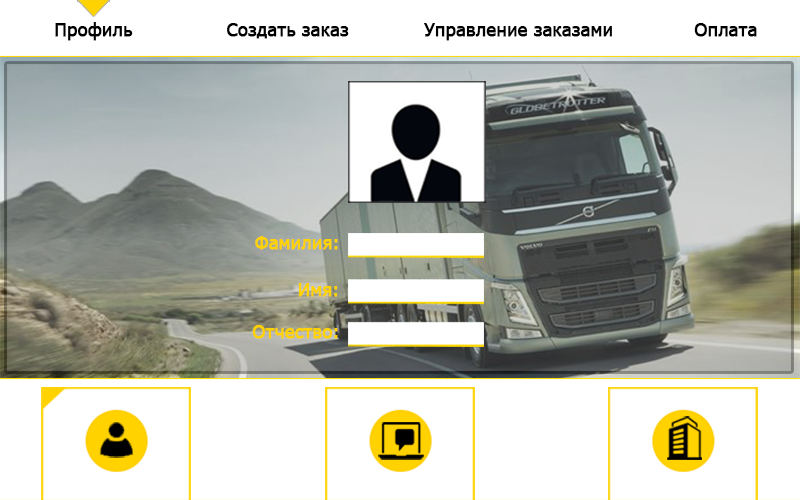
<style>
.page{position:relative;width:800px;height:500px;background:#ffffff}
.page>*{position:absolute;margin:0}
.t1{font:18px "Tahoma";color:#000000;font-weight:bold}
.t2{font:13.5px "Tahoma";color:#ffd200;font-weight:bold}
</style>
<div class="page">
<p class="t1" style="left:55px;top:22px;width:78px;height:19px">Профиль</p>
<p class="t1" style="left:227px;top:23px;width:122px;height:16px">Создать заказ</p>
<p class="t1" style="left:424px;top:23px;width:188px;height:18px">Управление заказами</p>
<p class="t1" style="left:694px;top:23px;width:63px;height:14px">Оплата</p>
<p class="t2" style="left:255px;top:236px;width:83px;height:14px">Фамилия:</p>
<p class="t2" style="left:298px;top:283px;width:40px;height:14px">Имя:</p>
<p class="t2" style="left:252px;top:325px;width:86px;height:14px">Отчество:</p>
</div>
